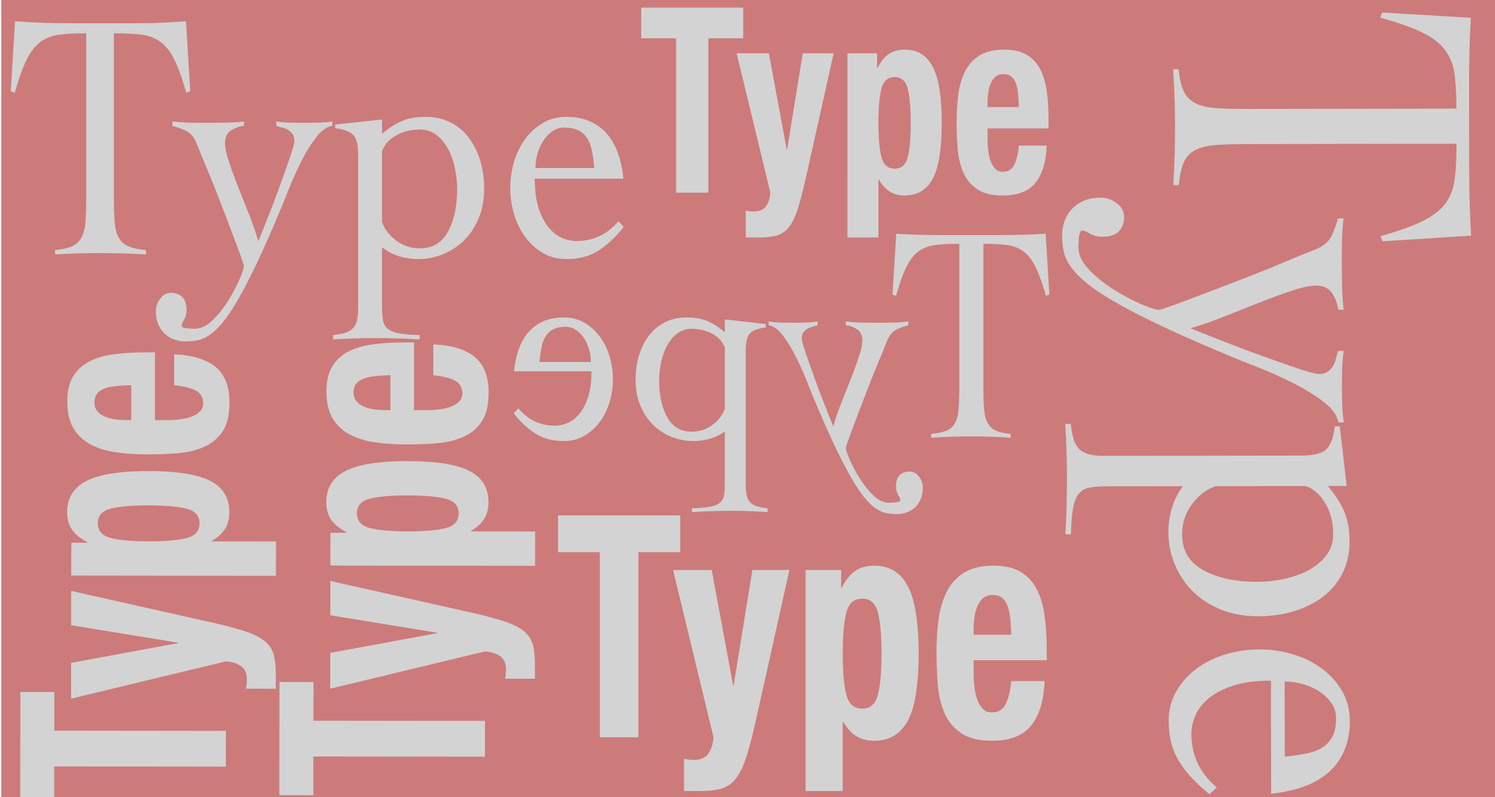
<style>
.page{position:relative;width:1495px;height:797px;background:#cd7a7a}
.page>*{position:absolute;margin:0}
.t1{font:259.2px "HelveticaNeue-CondensedBold";letter-spacing:0.01em;color:#d3d3d3;scale:0.86 1}
.t2{font:452.3px "Cochin";letter-spacing:0.01em;color:#d3d3d3;scale:0.86 1}
.t3{font:354.4px "Cochin";letter-spacing:0.01em;color:#d3d3d3;scale:0.86 1}
.t4{font:309.9px "Cochin";letter-spacing:0.01em;color:#d3d3d3;scale:0.86 1}
.t5{font:288px "HelveticaNeue-CondensedBold";letter-spacing:0.01em;color:#d3d3d3;scale:0.86 1}
.t6{font:310.8px "HelveticaNeue-CondensedBold";letter-spacing:0.01em;color:#d3d3d3;scale:0.86 1}
</style>
<div class="page">
<p class="t1" style="left:641px;top:7px;width:408px;height:231px">Type</p>
<p class="t2" style="left:1062px;top:12px;width:410px;height:783px;rotate:90deg">Type</p>
<p class="t3" style="left:11px;top:21px;width:613px;height:321px">Type</p>
<p class="t4" style="left:514px;top:234px;width:536px;height:280px;rotate:180deg">Type</p>
<p class="t5" style="left:279px;top:342px;width:257px;height:454px;rotate:-90deg">Type</p>
<p class="t6" style="left:558px;top:516px;width:489px;height:276px">Type</p>
</div>
